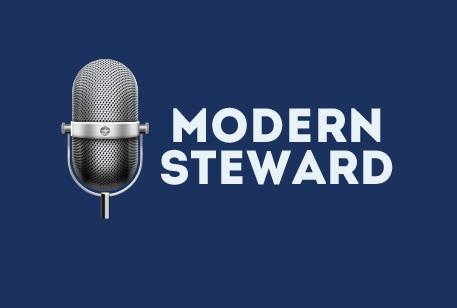
<style>
.page{position:relative;width:457px;height:308px;background:#1b325e}
.page>*{position:absolute;margin:0}
.t1{font:48px/42px "Intro";color:#e9f2f9}
</style>
<div class="page">
<p class="t1" style="left:161px;top:107px;width:232px;height:78px;text-align:center">Modern<br>Steward</p>
</div>
